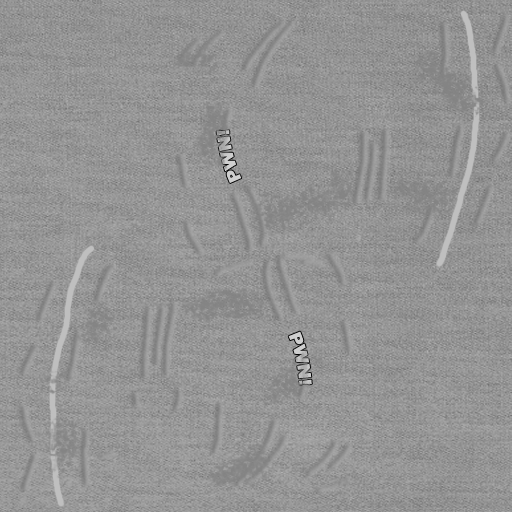
<style>
.page{position:relative;width:512px;height:512px}
.page>*{position:absolute;margin:0}
.t1{font:17px "Arial-Black"}
.t2{font:17px "Arial-Black";color:#c2c2c2}
</style>
<div class="page">
<p class="t1" style="left:216px;top:130px;width:26px;height:53px;rotate:-104deg">PWN!</p>
<p class="t2" style="left:288px;top:331px;width:24px;height:54px;rotate:78deg">PWN!</p>
</div>
